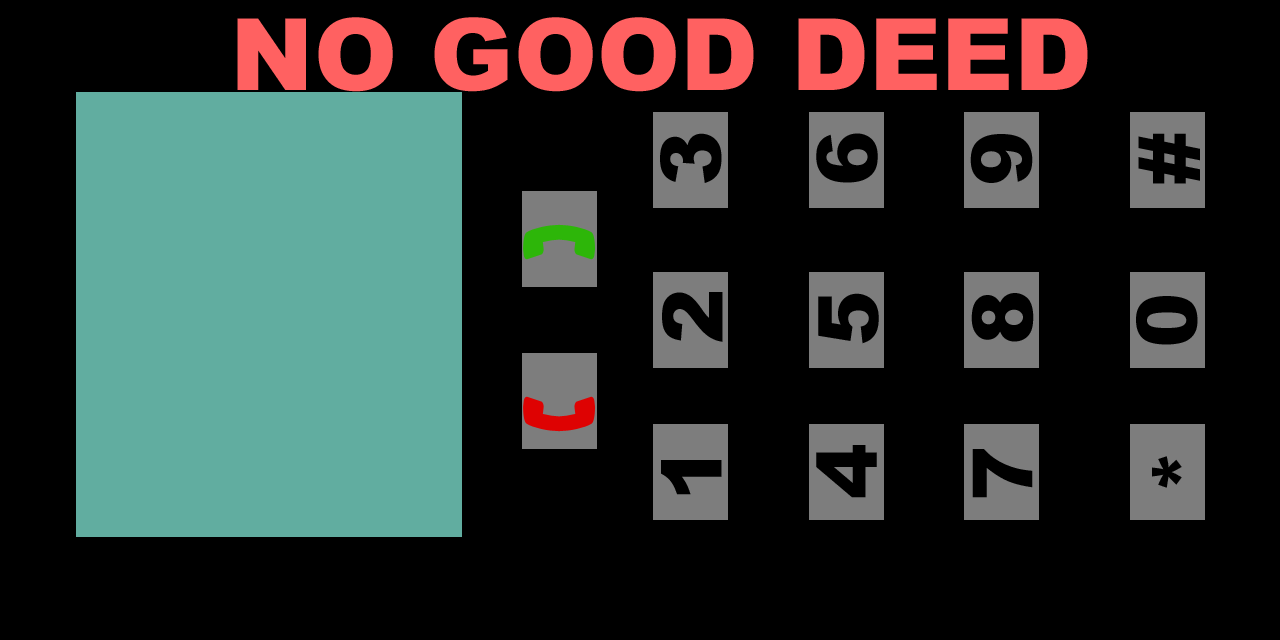
<style>
.page{position:relative;width:1280px;height:640px;background:#000000}
.page>*{position:absolute;margin:0}
.t1{font:100px "Arial-Black";color:#ff6161}
.t2{font:83.3px "Arial-Black";color:#000000}
</style>
<div class="page">
<p class="t1" style="left:237px;top:17px;width:851px;height:75px">NO GOOD DEED</p>
<p class="t2" style="left:660px;top:133px;width:62px;height:50px;rotate:-90deg">3</p>
<p class="t2" style="left:816px;top:133px;width:62px;height:50px;rotate:-90deg">6</p>
<p class="t2" style="left:970px;top:134px;width:63px;height:49px;rotate:-90deg">9</p>
<p class="t2" style="left:1138px;top:133px;width:62px;height:51px;rotate:-90deg">#</p>
<p class="t2" style="left:662px;top:292px;width:61px;height:50px;rotate:-90deg">2</p>
<p class="t2" style="left:818px;top:293px;width:61px;height:51px;rotate:-90deg">5</p>
<p class="t2" style="left:971px;top:293px;width:63px;height:49px;rotate:-90deg">8</p>
<p class="t2" style="left:1136px;top:296px;width:62px;height:49px;rotate:-90deg">0</p>
<p class="t2" style="left:816px;top:445px;width:61px;height:53px;rotate:-90deg">4</p>
<p class="t2" style="left:972px;top:449px;width:61px;height:49px;rotate:-90deg">7</p>
<p class="t2" style="left:661px;top:460px;width:61px;height:35px;rotate:-90deg">1</p>
<p class="t2" style="left:1152px;top:456px;width:30px;height:32px;rotate:-90deg">*</p>
</div>
